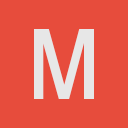
<style>
.page{position:relative;width:128px;height:128px;background:#e74c3c}
.page>*{position:absolute;margin:0}
.t1{font:100px "BebasNeueRegular";color:#e7e7e7;scale:1.35 1}
</style>
<div class="page">
<p class="t1" style="left:34px;top:29px;width:60px;height:70px">M</p>
</div>
